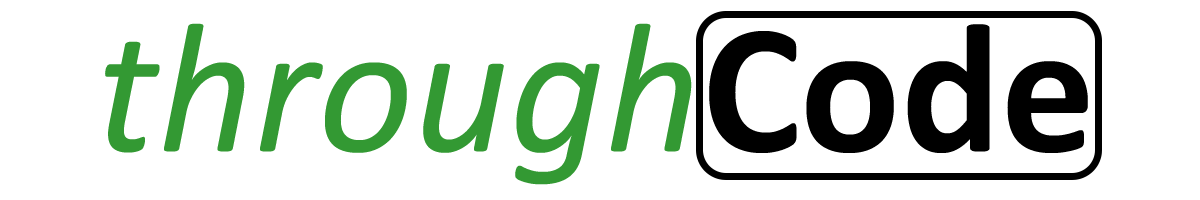
<style>
.page{position:relative;width:1200px;height:200px;background:#ffffff}
.page>*{position:absolute;margin:0}
.t1{font:187px "Calibri-Italic";color:#339933}
.t2{font:187px "Calibri-Bold";color:#000000}
</style>
<div class="page">
<p class="t1" style="left:105px;top:23px;width:983px;height:162px">through<span class="t2">Code</span></p>
</div>
